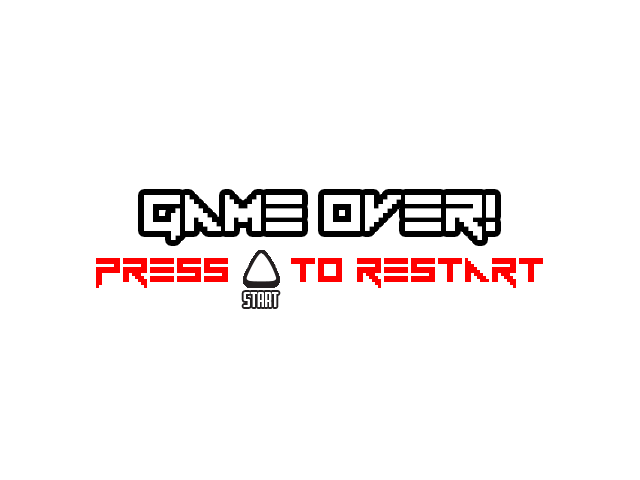
<style>
.page{position:relative;width:640px;height:480px;background:#ffffff}
.page>*{position:absolute;margin:0}
.t1{font:48px "Vermin-Vibes-1989";color:#ff0000}
.t2{font:18px "Fresno-Black";color:#ffffff}
</style>
<div class="page">
<p class="t1" style="left:96px;top:258px;width:447px;height:30px">press     to restart</p>
<p class="t2" style="left:243px;top:292px;width:36px;height:15px">start</p>
</div>
